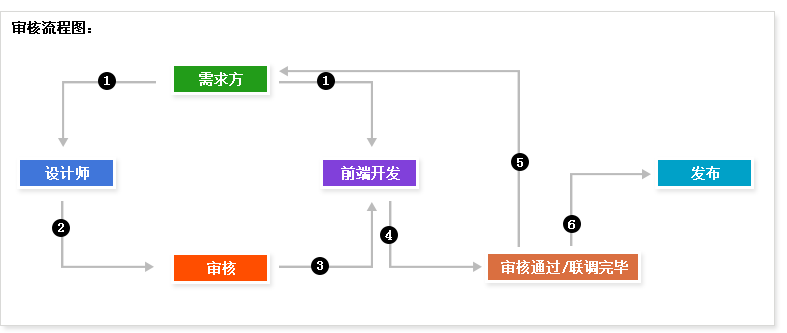
<style>
.page{position:relative;width:787px;height:333px;background:#ffffff}
.page>*{position:absolute;margin:0}
.t1{font:14px "SimSun";color:#ffffff;font-weight:bold}
</style>
<div class="page">
<p class="t1" style="left:104px;top:76px;width:6px;height:9px">1</p>
<p class="t1" style="left:199px;top:72px;width:44px;height:14px">需求方</p>
<p class="t1" style="left:323px;top:76px;width:6px;height:9px">1</p>
<p class="t1" style="left:517px;top:158px;width:6px;height:9px">5</p>
<p class="t1" style="left:45px;top:166px;width:44px;height:14px">设计师</p>
<p class="t1" style="left:341px;top:166px;width:59px;height:14px">前端开发</p>
<p class="t1" style="left:691px;top:166px;width:29px;height:14px">发布</p>
<p class="t1" style="left:568px;top:220px;width:7px;height:9px">6</p>
<p class="t1" style="left:58px;top:223px;width:6px;height:9px">2</p>
<p class="t1" style="left:385px;top:230px;width:7px;height:10px">4</p>
<p class="t1" style="left:207px;top:261px;width:29px;height:14px">审核</p>
<p class="t1" style="left:317px;top:261px;width:6px;height:9px">3</p>
<p class="t1" style="left:501px;top:260px;width:127px;height:14px">审核通过/联调完毕</p>
</div>
